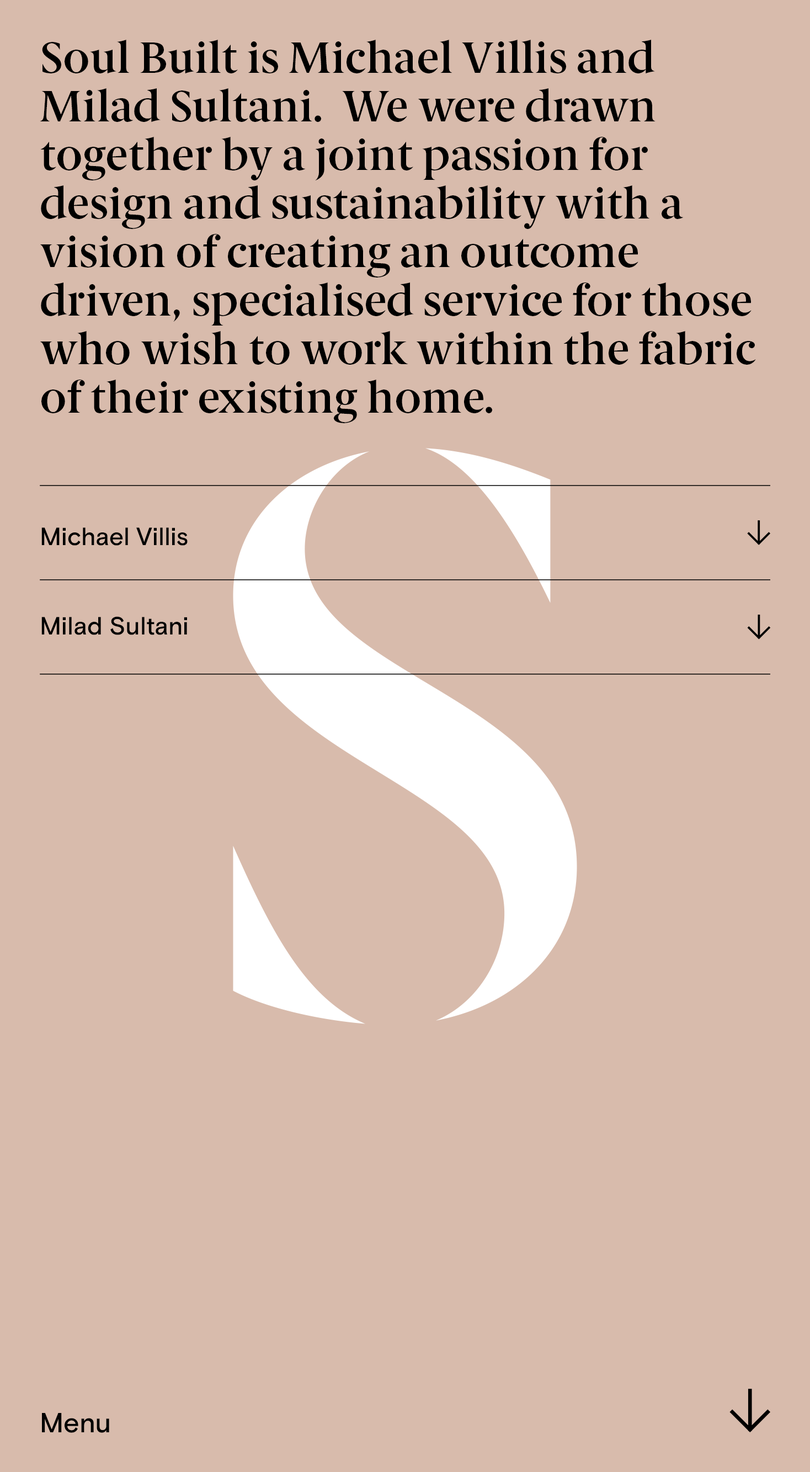
<style>
.page{position:relative;width:810px;height:1472px;background:#d8bbac}
.page>*{position:absolute;margin:0}
.t1{font:44.1px "BerlingskeSerif-DemiBold";color:#000000}
.t2{font:44.1px "BerlingskeSerif-DemiBold";letter-spacing:-0.009em;color:#000000}
.t3{font:44.1px "BerlingskeSerif-DemiBold";letter-spacing:-0.02em;color:#000000}
.t4{font:44.1px "BerlingskeSerif-DemiBold";letter-spacing:-0.07em;color:#000000}
.t5{font:44.1px "BerlingskeSerif-DemiBold";letter-spacing:-0.05em;color:#000000}
.t6{font:44.1px "BerlingskeSerif-DemiBold";letter-spacing:-0.019em;color:#000000}
.t7{font:44.1px "BerlingskeSerif-DemiBold";letter-spacing:-0.03em;color:#000000}
.t8{font:44.1px "BerlingskeSerif-DemiBold";letter-spacing:-0.01em;color:#000000}
.t9{font:44.1px "BerlingskeSerif-DemiBold";letter-spacing:-0.029em;color:#000000}
.t10{font:44.1px "BerlingskeSerif-DemiBold";letter-spacing:-0.04em;color:#000000}
.t11{font:25px "BasisGrotesquePro-Medium";color:#000000}
.t12{font:25px "BasisGrotesquePro-Medium";letter-spacing:-0.005em;color:#000000}
.t13{font:25px "BasisGrotesquePro-Medium";letter-spacing:-0.007em;color:#000000}
.t14{font:25px "BasisGrotesquePro-Medium";letter-spacing:-0.01em;color:#000000}
.t15{font:25px "BasisGrotesquePro-Medium";letter-spacing:-0.006em;color:#000000}
.t16{font:25px "BasisGrotesquePro-Medium";letter-spacing:-0.013em;color:#000000}
.t17{font:25px "BasisGrotesquePro-Medium";letter-spacing:-0.009em;color:#000000}
.t18{font:25px "BasisGrotesquePro-Medium";letter-spacing:-0.014em;color:#000000}
.t19{font:27.6px "BasisGrotesquePro-Medium";letter-spacing:-0.007em;color:#000000}
.t20{font:27.6px "BasisGrotesquePro-Medium";color:#000000}
.t21{font:27.6px "BasisGrotesquePro-Medium";letter-spacing:-0.009em;color:#000000}
</style>
<div class="page">
<p class="t1" style="left:42px;top:40px;width:613px;height:33px">Soul <span class="t2">B</span>uilt is Michael Villis and</p>
<p class="t1" style="left:40px;top:88px;width:616px;height:34px">Milad <span class="t3">S</span>ultani.  <span class="t4">W</span>e <span class="t5">w</span>e<span class="t6">r</span>e d<span class="t6">r</span><span class="t7">aw</span>n</p>
<p class="t1" style="left:40px;top:137px;width:608px;height:43px">together <span class="t7">b</span>y a joint passion for</p>
<p class="t1" style="left:41px;top:185px;width:643px;height:44px">design and <span class="t7">s</span>u<span class="t7">s</span>tainability <span class="t3">w</span>ith a</p>
<p class="t1" style="left:40px;top:234px;width:598px;height:44px"><span class="t6">v</span>ision of c<span class="t3">r</span>eating an ou<span class="t8">t</span><span class="t6">c</span>ome</p>
<p class="t1" style="left:41px;top:283px;width:711px;height:43px">dr<span class="t9">i</span><span class="t5">v</span>en, specialised ser<span class="t3">v</span>i<span class="t6">c</span>e for those</p>
<p class="t1" style="left:40px;top:331px;width:716px;height:34px"><span class="t10">w</span>ho <span class="t6">w</span>ish to <span class="t5">w</span>o<span class="t6">r</span>k <span class="t3">w</span>ithin the <span class="t8">f</span>abric</p>
<p class="t1" style="left:41px;top:380px;width:451px;height:43px">of their <span class="t10">e</span>xi<span class="t7">s</span>ting hom<span class="t3">e</span>.</p>
<p class="t11" style="left:41px;top:527px;width:147px;height:19px">M<span class="t12">i</span><span class="t13">c</span><span class="t14">h</span><span class="t15">a</span>el Vill<span class="t16">i</span>s</p>
<p class="t11" style="left:41px;top:616px;width:146px;height:19px">Mi<span class="t17">l</span><span class="t12">a</span>d Sul<span class="t13">t</span><span class="t18">a</span>ni</p>
<p class="t19" style="left:42px;top:1413px;width:67px;height:20px">M<span class="t20">e</span><span class="t21">n</span><span class="t20">u</span></p>
</div>
